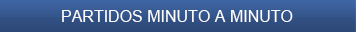
<style>
.page{position:relative;width:356px;height:32px}
.page>*{position:absolute;margin:0}
.t1{font:16px "ArialMT";color:#ffffff}
</style>
<div class="page">
<p class="t1" style="left:62px;top:10px;width:231px;height:12px">PARTIDOS MINUTO A MINUTO</p>
</div>
